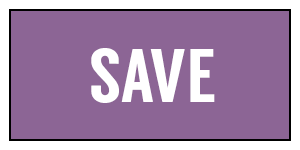
<style>
.page{position:relative;width:300px;height:150px;background:#8c6595}
.page>*{position:absolute;margin:0}
.t1{font:75px "Langdon";color:#ffffff}
</style>
<div class="page">
<p class="t1" style="left:91px;top:48px;width:124px;height:55px">SAVE</p>
</div>
